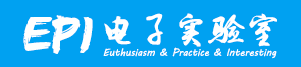
<style>
.page{position:relative;width:301px;height:67px;background:#00a1f1}
.page>*{position:absolute;margin:0}
.t1{font:48px "EdoSZ";color:#ffffff;scale:0.9 1}
.t2{font:36px "Li-Xuke";color:#ffffff}
.t3{font:10px "MVBoli";color:#ffffff}
</style>
<div class="page">
<p class="t1" style="left:23px;top:15px;width:70px;height:39px">EPI</p>
<p class="t2" style="left:104px;top:13px;width:173px;height:34px">电子实验室</p>
<p class="t3" style="left:103px;top:47px;width:174px;height:12px">Euthusiasm &amp; Practice &amp; Interesting</p>
</div>
